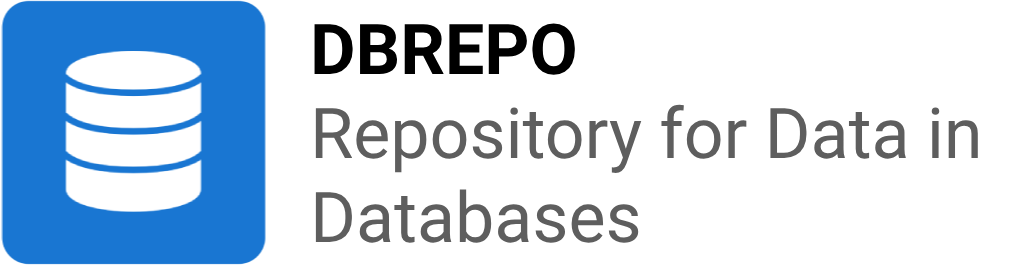
<style>
.page{position:relative;width:1024px;height:265px;background:#ffffff}
.page>*{position:absolute;margin:0}
.t1{font:70px "Roboto-Regular";color:#5e5e5e}
.t2{font:70px "Roboto-Bold";color:#000000}
</style>
<div class="page">
<p class="t1" style="left:314px;top:23px;width:664px;height:220px"><span class="t2">DBREPO<br></span>Repository for Data in<br>Databases</p>
</div>
